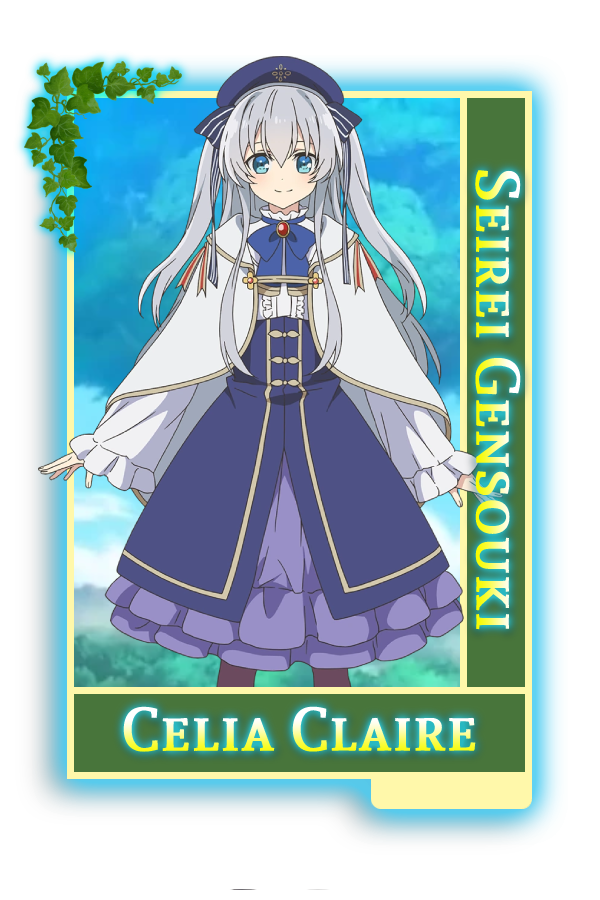
<style>
.page{position:relative;width:600px;height:900px;background:#ffffff}
.page>*{position:absolute;margin:0}
.t1{font:61px "AndadaSC-Regular";font-weight:bold}
</style>
<div class="page">
<p class="t1" style="left:475px;top:170px;width:46px;height:460px;rotate:90deg">Seirei Gensouki</p>
<p class="t1" style="left:123px;top:706px;width:353px;height:46px">Celia Claire</p>
</div>
